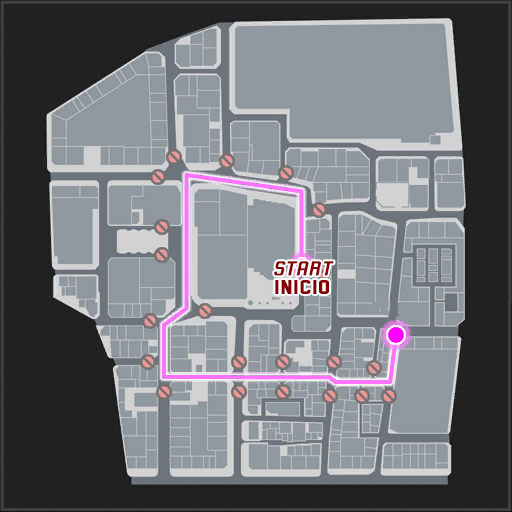
<style>
.page{position:relative;width:512px;height:512px;background:#9098a0}
.page>*{position:absolute;margin:0}
.t1{font:20.5px "LinotypeKaliber-Regular";color:#840000;font-weight:bold;font-style:italic;scale:1.18 1}
.t2{font:20.5px "LinotypeKaliber-Black";color:#840000;scale:1.18 1}
</style>
<div class="page">
<p class="t1" style="left:274px;top:261px;width:60px;height:15px">START</p>
<p class="t2" style="left:275px;top:280px;width:54px;height:14px">INICIO</p>
</div>
